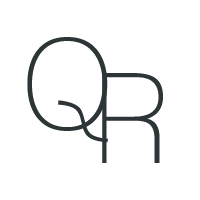
<style>
.page{position:relative;width:200px;height:200px;background:#ffffff}
.page>*{position:absolute;margin:0}
.t1{font:125px "Lane-Narrow";color:#2d3537}
</style>
<div class="page">
<p class="t1" style="left:27px;top:37px;width:81px;height:106px">Q</p>
<p class="t1" style="left:102px;top:73px;width:61px;height:90px">R</p>
</div>
